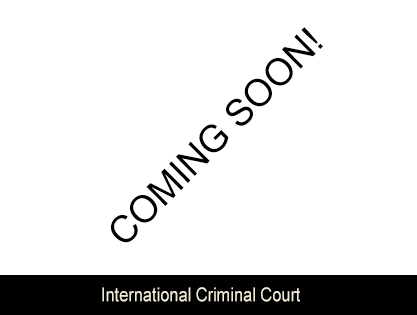
<style>
.page{position:relative;width:417px;height:315px;background:#ffffff}
.page>*{position:absolute;margin:0}
.t1{font:37.7px "ArialMT";color:#000000}
.t2{font:19.2px "ArialMT";color:#f3ecda;scale:0.86 1}
</style>
<div class="page">
<p class="t1" style="left:110px;top:27px;width:213px;height:216px;rotate:-45deg">COMING SOON!</p>
<p class="t2" style="left:102px;top:287px;width:198px;height:15px">International Criminal Court</p>
</div>
